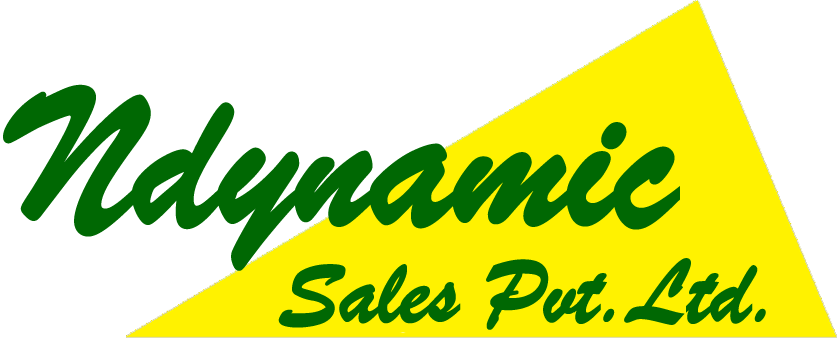
<style>
.page{position:relative;width:839px;height:339px;background:#ffffff}
.page>*{position:absolute;margin:0}
.t1{font:204.6px "BrushScriptMT";letter-spacing:-0.025em;color:#006803;font-weight:bold}
.t2{font:94.6px "BrushScriptMT";letter-spacing:-0.025em;color:#006803;font-weight:bold}
</style>
<div class="page">
<p class="t1" style="left:3px;top:84px;width:677px;height:187px">Ndynamic</p>
<p class="t2" style="left:278px;top:258px;width:488px;height:72px">Sales Pvt.Ltd.</p>
</div>
